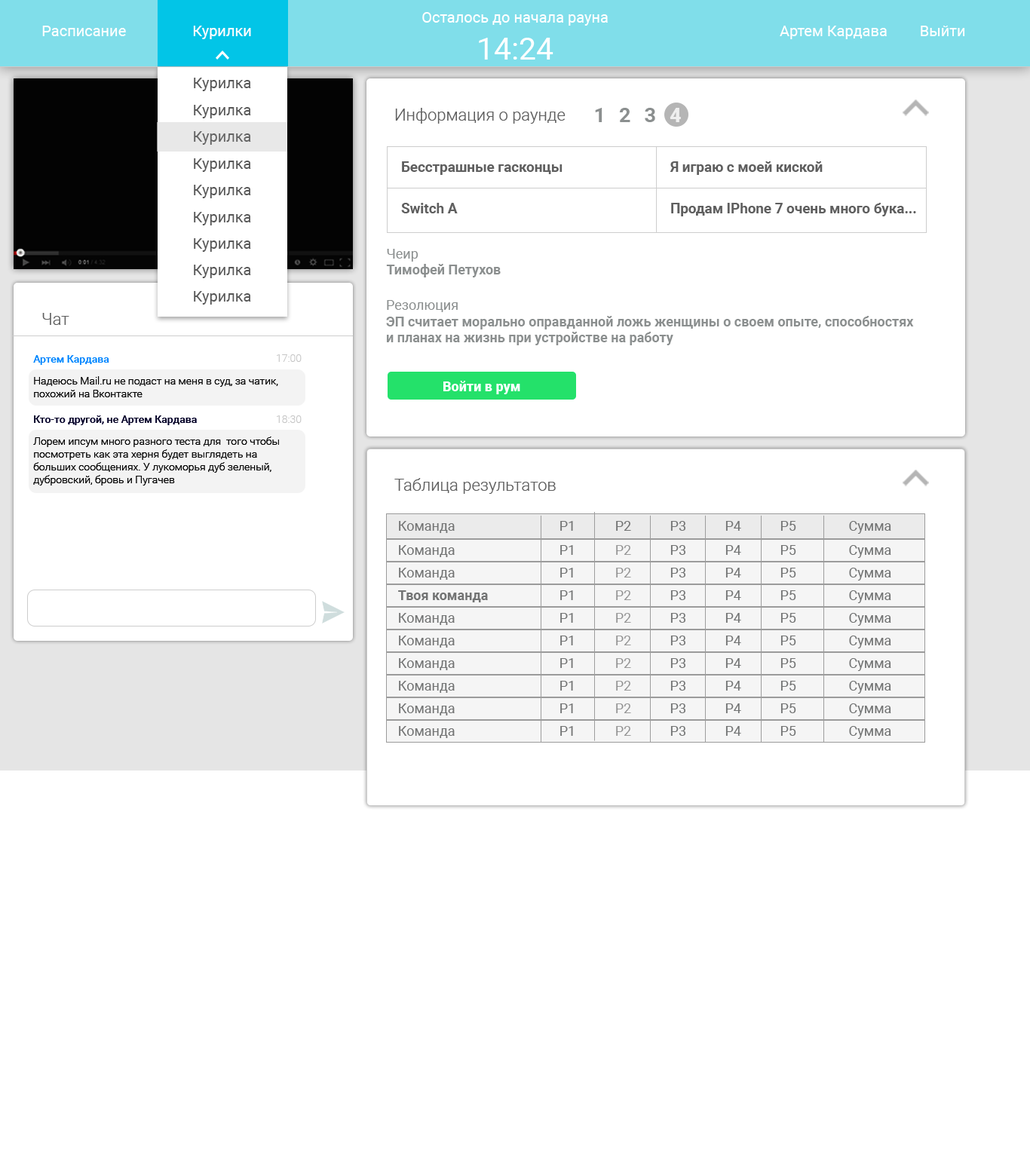
<style>
.page{position:relative;width:1030px;height:1158px;background:#ffffff}
.page>*{position:absolute;margin:0}
.t1{font:15.1px "Roboto-Regular";color:#ffffff}
.t2{font:30.9px "Roboto-Regular";color:#ffffff}
.t3{font:15.1px "Roboto-Regular";color:#585858}
.t4{font:16.6px "Roboto-Light";color:#5f5f5f}
.t5{font:20.3px "Roboto-Bold";color:#8b8f8f}
.t6{font:20.3px "Roboto-Black";color:#f7f7f7}
.t7{font:15.1px "Roboto-Regular";color:#646464}
.t8{font:14.3px "Roboto-Bold";color:#5f5f5f}
.t9{font:13.6px "Roboto-Bold";color:#8b8f8f}
.t10{font:13.6px "Roboto-Regular";color:#8b8f8f}
.t11{font:13.4px "Roboto-Bold";color:#8b8f8f}
.t12{font:13.4px "Roboto-Regular";color:#8b8f8f}
.t13{font:10.6px "Roboto-Medium";color:#057eff}
.t14{font:10.6px "Roboto-Light";color:#c5c5c5}
.t15{font:10.6px "Roboto-Light";color:#090909}
.t16{font:13.6px "Roboto-Black";color:#ffffff}
.t17{font:10.6px "Roboto-Medium";color:#030121}
.t18{font:13.6px "Roboto-Regular";color:#737474}
.t19{font:13.7px "Roboto-Regular";color:#737474}
.t20{font:13.7px "Roboto-Regular";color:#989898}
.t21{font:13.6px "Roboto-Bold";color:#737474}
</style>
<div class="page">
<p class="t1" style="left:422px;top:12px;width:186px;height:48px;text-align:center">Осталось до начала рауна<br><span class="t2">14:24</span></p>
<p class="t1" style="left:42px;top:26px;width:84px;height:10px">Расписание</p>
<p class="t1" style="left:193px;top:26px;width:58px;height:13px">Курилки</p>
<p class="t1" style="left:780px;top:26px;width:107px;height:13px">Артем Кардава</p>
<p class="t1" style="left:920px;top:26px;width:45px;height:10px">Выйти</p>
<p class="t3" style="left:194px;top:78px;width:57px;height:13px">Курилка</p>
<p class="t3" style="left:194px;top:105px;width:57px;height:13px">Курилка</p>
<p class="t4" style="left:395px;top:108px;width:170px;height:16px">Информация о раунде</p>
<p class="t5" style="left:595px;top:108px;width:7px;height:14px">1</p>
<p class="t5" style="left:619px;top:108px;width:11px;height:14px">2</p>
<p class="t5" style="left:645px;top:108px;width:10px;height:14px">3</p>
<p class="t6" style="left:669px;top:108px;width:12px;height:14px">4</p>
<p class="t7" style="left:194px;top:131px;width:57px;height:14px">Курилка</p>
<p class="t3" style="left:194px;top:158px;width:57px;height:14px">Курилка</p>
<p class="t8" style="left:402px;top:161px;width:160px;height:14px">Бесстрашные гасконцы</p>
<p class="t8" style="left:669px;top:161px;width:153px;height:14px">Я играю с моей киской</p>
<p class="t3" style="left:194px;top:185px;width:57px;height:13px">Курилка</p>
<p class="t8" style="left:401px;top:203px;width:57px;height:10px">Switch A</p>
<p class="t8" style="left:671px;top:203px;width:245px;height:13px">Продам IPhone 7 очень много бука...</p>
<p class="t3" style="left:194px;top:212px;width:57px;height:13px">Курилка</p>
<p class="t3" style="left:194px;top:238px;width:57px;height:14px">Курилка</p>
<p class="t9" style="left:386px;top:249px;width:115px;height:28px"><span class="t10">Чеир <br></span>Тимофей Петухов</p>
<p class="t3" style="left:194px;top:265px;width:57px;height:13px">Курилка</p>
<p class="t3" style="left:194px;top:291px;width:57px;height:14px">Курилка</p>
<p class="t11" style="left:386px;top:300px;width:528px;height:45px"><span class="t12">Резолюция <br></span>ЭП считает морально оправданной ложь женщины о своем опыте, способностях и планах на жизнь при устройстве на работу</p>
<p class="t4" style="left:42px;top:313px;width:27px;height:12px">Чат</p>
<p class="t13" style="left:33px;top:355px;width:76px;height:10px">Артем Кардава</p>
<p class="t14" style="left:277px;top:354px;width:25px;height:8px">17:00</p>
<p class="t15" style="left:34px;top:376px;width:244px;height:21px">Надеюсь Mail.ru не подаст на меня в суд, за чатик, похожий на Вконтакте</p>
<p class="t16" style="left:443px;top:381px;width:77px;height:13px">Войти в рум</p>
<p class="t17" style="left:34px;top:415px;width:163px;height:10px">Кто-то другой, не Артем Кардава</p>
<p class="t14" style="left:277px;top:415px;width:25px;height:8px">18:30</p>
<p class="t15" style="left:33px;top:436px;width:246px;height:49px">Лорем ипсум много разного теста для  того чтобы посмотреть как эта херня будет выглядеть на больших сообщениях. У лукоморья дуб зеленый, дубровский, бровь и Пугачев</p>
<p class="t4" style="left:394px;top:478px;width:162px;height:16px">Таблица результатов</p>
<p class="t18" style="left:399px;top:521px;width:56px;height:12px">Команда</p>
<p class="t19" style="left:560px;top:521px;width:13px;height:10px">Р1</p>
<p class="t19" style="left:616px;top:521px;width:15px;height:10px">Р2</p>
<p class="t19" style="left:670px;top:521px;width:15px;height:10px">Р3</p>
<p class="t19" style="left:725px;top:521px;width:16px;height:10px">Р4</p>
<p class="t19" style="left:780px;top:521px;width:16px;height:10px">Р5</p>
<p class="t19" style="left:849px;top:521px;width:42px;height:13px">Сумма</p>
<p class="t18" style="left:399px;top:545px;width:56px;height:12px">Команда</p>
<p class="t19" style="left:560px;top:545px;width:13px;height:10px">Р1</p>
<p class="t20" style="left:616px;top:545px;width:15px;height:10px">Р2</p>
<p class="t19" style="left:670px;top:545px;width:15px;height:10px">Р3</p>
<p class="t19" style="left:725px;top:545px;width:16px;height:10px">Р4</p>
<p class="t19" style="left:780px;top:545px;width:16px;height:10px">Р5</p>
<p class="t19" style="left:849px;top:545px;width:42px;height:13px">Сумма</p>
<p class="t18" style="left:399px;top:568px;width:56px;height:12px">Команда</p>
<p class="t19" style="left:560px;top:568px;width:13px;height:9px">Р1</p>
<p class="t20" style="left:616px;top:568px;width:15px;height:9px">Р2</p>
<p class="t19" style="left:670px;top:568px;width:15px;height:9px">Р3</p>
<p class="t19" style="left:725px;top:568px;width:16px;height:9px">Р4</p>
<p class="t19" style="left:780px;top:568px;width:16px;height:9px">Р5</p>
<p class="t19" style="left:849px;top:568px;width:42px;height:12px">Сумма</p>
<p class="t21" style="left:398px;top:590px;width:90px;height:12px">Твоя команда</p>
<p class="t19" style="left:560px;top:590px;width:13px;height:10px">Р1</p>
<p class="t20" style="left:616px;top:590px;width:15px;height:10px">Р2</p>
<p class="t19" style="left:670px;top:590px;width:15px;height:10px">Р3</p>
<p class="t19" style="left:725px;top:590px;width:16px;height:10px">Р4</p>
<p class="t19" style="left:780px;top:590px;width:16px;height:10px">Р5</p>
<p class="t19" style="left:849px;top:590px;width:42px;height:13px">Сумма</p>
<p class="t18" style="left:399px;top:613px;width:56px;height:12px">Команда</p>
<p class="t19" style="left:560px;top:613px;width:13px;height:10px">Р1</p>
<p class="t20" style="left:616px;top:613px;width:15px;height:10px">Р2</p>
<p class="t19" style="left:670px;top:613px;width:15px;height:10px">Р3</p>
<p class="t19" style="left:725px;top:613px;width:16px;height:10px">Р4</p>
<p class="t19" style="left:780px;top:613px;width:16px;height:10px">Р5</p>
<p class="t19" style="left:849px;top:613px;width:42px;height:13px">Сумма</p>
<p class="t18" style="left:399px;top:636px;width:56px;height:12px">Команда</p>
<p class="t19" style="left:560px;top:636px;width:13px;height:9px">Р1</p>
<p class="t20" style="left:616px;top:636px;width:15px;height:9px">Р2</p>
<p class="t19" style="left:670px;top:636px;width:15px;height:9px">Р3</p>
<p class="t19" style="left:725px;top:636px;width:16px;height:9px">Р4</p>
<p class="t19" style="left:780px;top:636px;width:16px;height:9px">Р5</p>
<p class="t19" style="left:849px;top:636px;width:42px;height:12px">Сумма</p>
<p class="t18" style="left:399px;top:658px;width:56px;height:12px">Команда</p>
<p class="t19" style="left:560px;top:658px;width:13px;height:10px">Р1</p>
<p class="t20" style="left:616px;top:658px;width:15px;height:10px">Р2</p>
<p class="t19" style="left:670px;top:658px;width:15px;height:10px">Р3</p>
<p class="t19" style="left:725px;top:658px;width:16px;height:10px">Р4</p>
<p class="t19" style="left:780px;top:658px;width:16px;height:10px">Р5</p>
<p class="t19" style="left:849px;top:658px;width:42px;height:13px">Сумма</p>
<p class="t18" style="left:399px;top:681px;width:56px;height:12px">Команда</p>
<p class="t19" style="left:560px;top:681px;width:13px;height:10px">Р1</p>
<p class="t20" style="left:616px;top:681px;width:15px;height:10px">Р2</p>
<p class="t19" style="left:670px;top:681px;width:15px;height:10px">Р3</p>
<p class="t19" style="left:725px;top:681px;width:16px;height:10px">Р4</p>
<p class="t19" style="left:780px;top:681px;width:16px;height:10px">Р5</p>
<p class="t19" style="left:849px;top:681px;width:42px;height:13px">Сумма</p>
<p class="t18" style="left:399px;top:703px;width:56px;height:12px">Команда</p>
<p class="t19" style="left:560px;top:703px;width:13px;height:10px">Р1</p>
<p class="t20" style="left:616px;top:703px;width:15px;height:10px">Р2</p>
<p class="t19" style="left:670px;top:703px;width:15px;height:10px">Р3</p>
<p class="t19" style="left:725px;top:703px;width:16px;height:10px">Р4</p>
<p class="t19" style="left:780px;top:703px;width:16px;height:10px">Р5</p>
<p class="t19" style="left:849px;top:703px;width:42px;height:13px">Сумма</p>
<p class="t18" style="left:399px;top:726px;width:56px;height:12px">Команда</p>
<p class="t19" style="left:560px;top:726px;width:13px;height:10px">Р1</p>
<p class="t20" style="left:616px;top:726px;width:15px;height:10px">Р2</p>
<p class="t19" style="left:670px;top:726px;width:15px;height:10px">Р3</p>
<p class="t19" style="left:725px;top:726px;width:16px;height:10px">Р4</p>
<p class="t19" style="left:780px;top:726px;width:16px;height:10px">Р5</p>
<p class="t19" style="left:849px;top:726px;width:42px;height:13px">Сумма</p>
</div>
